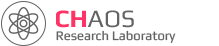
<style>
.page{position:relative;width:219px;height:46px;background:#ffffff}
.page>*{position:absolute;margin:0}
.t1{font:25px "Play";color:#636363}
.t2{font:25px "Play-Bold";color:#ff3366}
.t3{font:13px "Play";color:#636363}
</style>
<div class="page">
<p class="t1" style="left:56px;top:10px;width:78px;height:18px"><span class="t2">CH</span>AOS</p>
<p class="t3" style="left:56px;top:30px;width:120px;height:13px">Research Laboratory</p>
</div>
